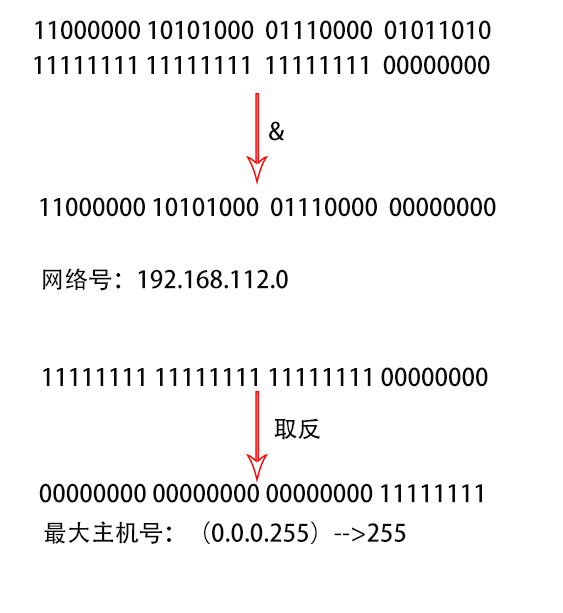
<style>
.page{position:relative;width:563px;height:613px;background:#ffffff}
.page>*{position:absolute;margin:0}
.t1{font:24px "AdobeHeitiStd-Regular";color:#0a0909}
</style>
<div class="page">
<p class="t1" style="left:35px;top:20px;width:456px;height:20px">11000000 10101000  01110000  01011010</p>
<p class="t1" style="left:34px;top:55px;width:456px;height:20px">11111111 11111111  11111111  00000000</p>
<p class="t1" style="left:269px;top:121px;width:16px;height:20px">&amp;</p>
<p class="t1" style="left:40px;top:197px;width:456px;height:20px">11000000 10101000  01110000  00000000</p>
<p class="t1" style="left:43px;top:268px;width:245px;height:23px">网络号：192.168.112.0</p>
<p class="t1" style="left:43px;top:367px;width:445px;height:20px">11111111 11111111 11111111 00000000</p>
<p class="t1" style="left:274px;top:418px;width:47px;height:22px">取反</p>
<p class="t1" style="left:39px;top:483px;width:443px;height:20px">00000000 00000000 00000000 11111111</p>
<p class="t1" style="left:44px;top:521px;width:362px;height:23px">最大主机号：（0.0.0.255）--&gt;255</p>
</div>
